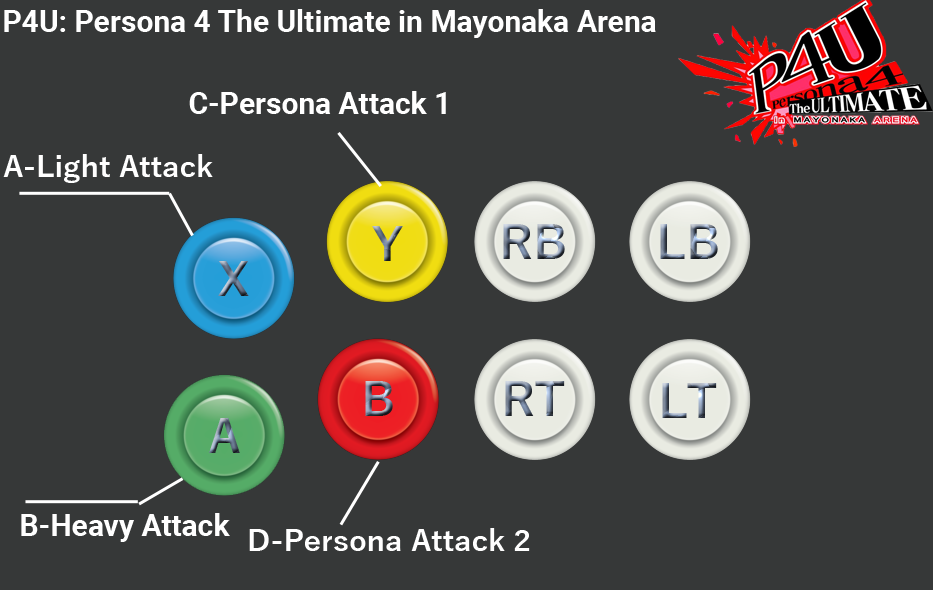
<style>
.page{position:relative;width:933px;height:590px;background:#363838}
.page>*{position:absolute;margin:0}
.t1{font:30px "Roboto-Bold";color:#ffffff}
.t2{font:30px "YuGothic-Bold";color:#ffffff}
</style>
<div class="page">
<p class="t1" style="left:4px;top:9px;width:652px;height:29px">P4U: Persona 4 The Ultimate in Mayonaka Arena</p>
<p class="t1" style="left:189px;top:91px;width:257px;height:23px">C-Persona Attack 1</p>
<p class="t2" style="left:3px;top:154px;width:210px;height:29px">A-Light Attack</p>
<p class="t1" style="left:21px;top:513px;width:209px;height:29px">B-Heavy Attack</p>
<p class="t2" style="left:249px;top:528px;width:281px;height:23px">D-Persona Attack 2</p>
</div>
